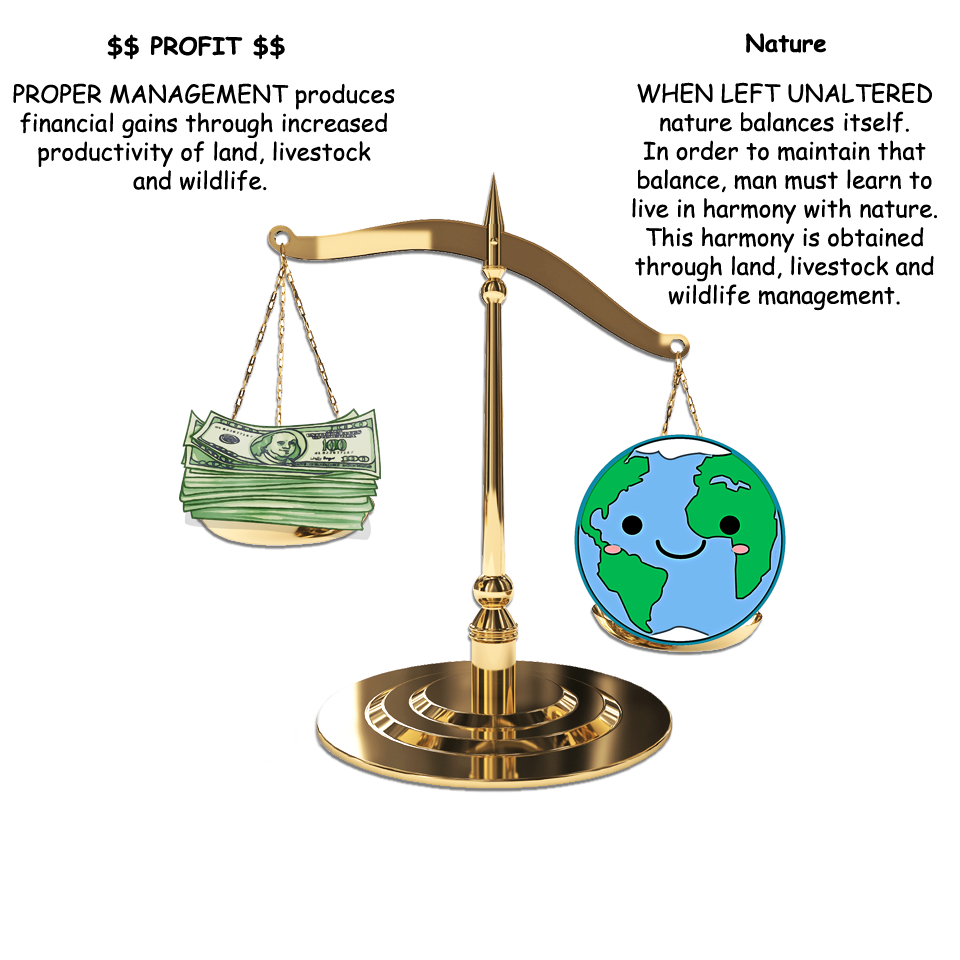
<style>
.page{position:relative;width:960px;height:960px;background:#ffffff}
.page>*{position:absolute;margin:0}
.t1{font:24px "ComicSansMS-Bold";color:#000000}
.t2{font:24px "ComicSansMS";color:#000000}
</style>
<div class="page">
<p class="t1" style="left:107px;top:34px;width:178px;height:26px">$$ PROFIT $$</p>
<p class="t1" style="left:746px;top:33px;width:80px;height:20px">Nature</p>
<p class="t2" style="left:13px;top:83px;width:382px;height:108px;text-align:center">PROPER MANAGEMENT produces<br>financial gains through increased<br>productivity of land, livestock<br>and wildlife.</p>
<p class="t2" style="left:632px;top:82px;width:305px;height:229px;text-align:center">WHEN LEFT UNALTERED<br>nature balances itself.<br>In order to maintain that<br>balance, man must learn to<br>live in harmony with nature.<br>This harmony is obtained<br>through land, livestock and<br>wildlife management.</p>
</div>
